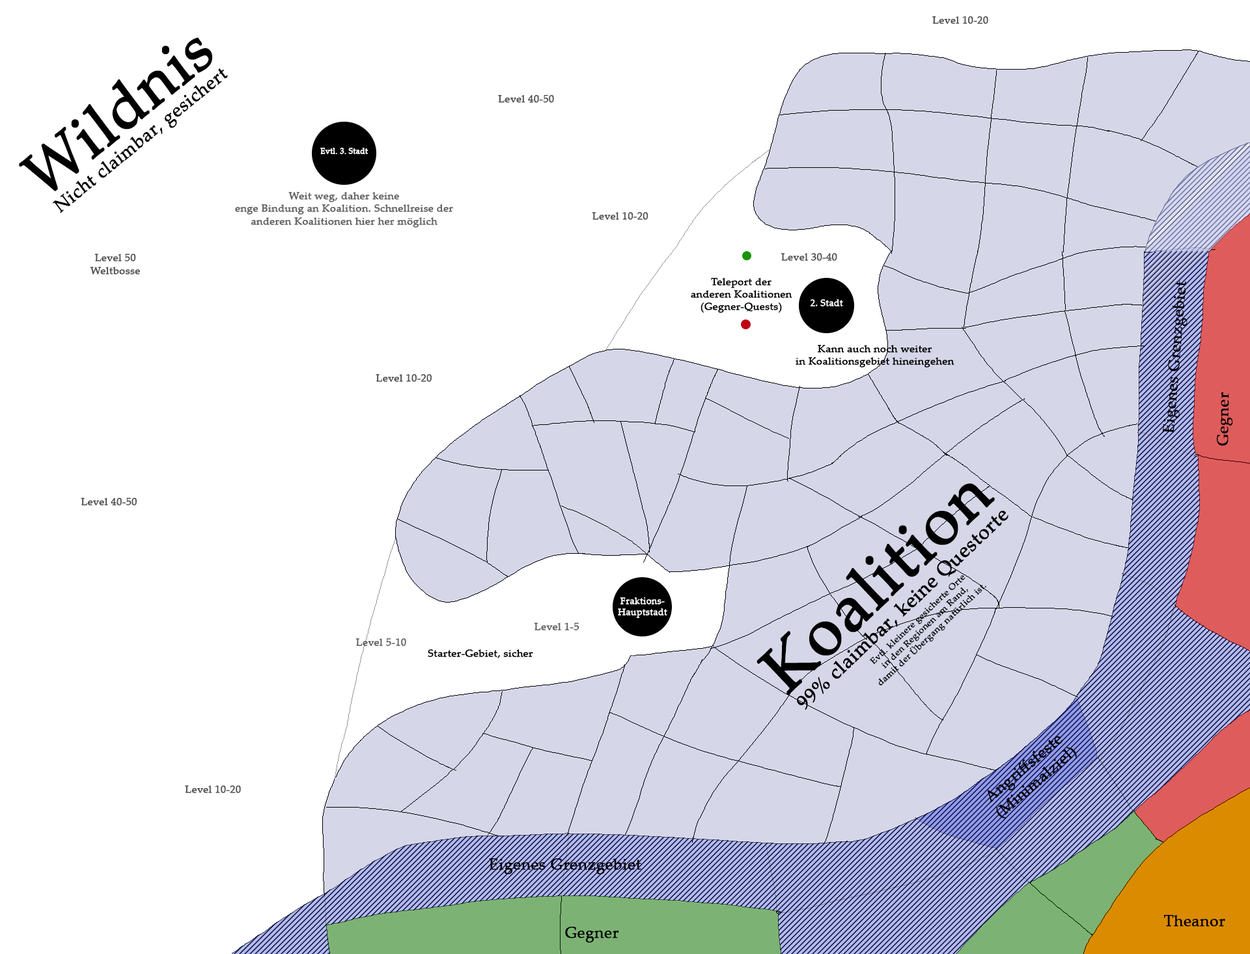
<style>
.page{position:relative;width:1250px;height:954px;background:#ffffff}
.page>*{position:absolute;margin:0}
.t1{font:10.4px "PalatinoLinotype-Roman";letter-spacing:0.01em;color:#535353;font-weight:bold}
.t2{font:18.3px "PalatinoLinotype-Roman";letter-spacing:0.01em;color:#000000;font-weight:bold}
.t3{font:61.1px "PalatinoLinotype-Roman";letter-spacing:0.01em;color:#000000;font-weight:bold}
.t4{font:7.8px "PalatinoLinotype-Roman";letter-spacing:0.01em;color:#fefefe;font-weight:bold}
.t5{font:10.4px "PalatinoLinotype-Roman";letter-spacing:0.01em;color:#626262;font-weight:bold}
.t6{font:10.4px "PalatinoLinotype-Roman";letter-spacing:0.01em;color:#000000;font-weight:bold}
.t7{font:15.6px "PalatinoLinotype-Roman";letter-spacing:0.01em;color:#000000;font-weight:bold}
.t8{font:9.1px "PalatinoLinotype-Roman";letter-spacing:0.01em;color:#ffffff;font-weight:bold}
.t9{font:19.5px "PalatinoLinotype-Roman";letter-spacing:0.01em;color:#000000;font-weight:bold}
.t10{font:65.1px "PalatinoLinotype-Roman";letter-spacing:0.01em;color:#000000;font-weight:bold}
.t11{font:8.5px "PalatinoLinotype-Roman";letter-spacing:0.01em;color:#000000;font-weight:bold;scale:1.07 1}
</style>
<div class="page">
<p class="t1" style="left:932px;top:16px;width:56px;height:8px">Level 10-20</p>
<p class="t2" style="left:19px;top:37px;width:209px;height:176px;text-align:center;rotate:-39deg"><span class="t3">Wildnis<br></span>Nicht claimbar, gesichert</p>
<p class="t1" style="left:498px;top:95px;width:56px;height:8px">Level 40-50</p>
<p class="t4" style="left:320px;top:148px;width:48px;height:6px">Evtl. 3. Stadt</p>
<p class="t5" style="left:235px;top:192px;width:218px;height:36px;text-align:center">Weit weg, daher keine<br>enge Bindung an Koalition. Schnellreise der<br>anderen Koalitionen hier her möglich</p>
<p class="t1" style="left:592px;top:212px;width:56px;height:8px">Level 10-20</p>
<p class="t1" style="left:90px;top:254px;width:50px;height:21px;text-align:center">Level 50<br>Weltbosse</p>
<p class="t1" style="left:780px;top:253px;width:57px;height:8px">Level 30-40</p>
<p class="t6" style="left:691px;top:278px;width:101px;height:35px;text-align:center">Teleport der<br>anderen Koalitionen<br>(Gegner-Quests)</p>
<p class="t7" style="left:1162px;top:281px;width:25px;height:152px;rotate:-85deg">Eigenes Grenzgebiet</p>
<p class="t8" style="left:810px;top:299px;width:33px;height:8px">2. Stadt</p>
<p class="t6" style="left:795px;top:345px;width:159px;height:23px;text-align:center">Kann auch noch weiter<br>in Koalitionsgebiet hineingehen</p>
<p class="t1" style="left:376px;top:374px;width:56px;height:8px">Level 10-20</p>
<p class="t7" style="left:1216px;top:392px;width:17px;height:54px;rotate:-89deg">Gegner</p>
<p class="t9" style="left:756px;top:484px;width:252px;height:226px;text-align:center;rotate:-43deg"><span class="t10">Koalition<br></span>99% claimbar, keine Questorte</p>
<p class="t1" style="left:81px;top:498px;width:56px;height:8px">Level 40-50</p>
<p class="t11" style="left:869px;top:575px;width:117px;height:111px;text-align:center;rotate:-43deg">Evtl. kleinere gesicherte Orte<br>in den Regionen am Rand,<br>damit der Übergang natürlich ist.</p>
<p class="t8" style="left:618px;top:598px;width:49px;height:20px;text-align:center">Fraktions-<br>Hauptstadt</p>
<p class="t5" style="left:534px;top:623px;width:45px;height:8px">Level 1-5</p>
<p class="t5" style="left:355px;top:639px;width:51px;height:7px">Level 5-10</p>
<p class="t6" style="left:428px;top:650px;width:105px;height:9px">Starter-Gebiet, sicher</p>
<p class="t7" style="left:987px;top:736px;width:90px;height:83px;text-align:center;rotate:-40deg">Angriffsfeste<br>(Minimalziel)</p>
<p class="t1" style="left:185px;top:786px;width:56px;height:7px">Level 10-20</p>
<p class="t7" style="left:489px;top:859px;width:152px;height:16px">Eigenes Grenzgebiet</p>
<p class="t7" style="left:1163px;top:915px;width:62px;height:12px">Theanor</p>
<p class="t7" style="left:565px;top:927px;width:54px;height:16px">Gegner</p>
</div>
